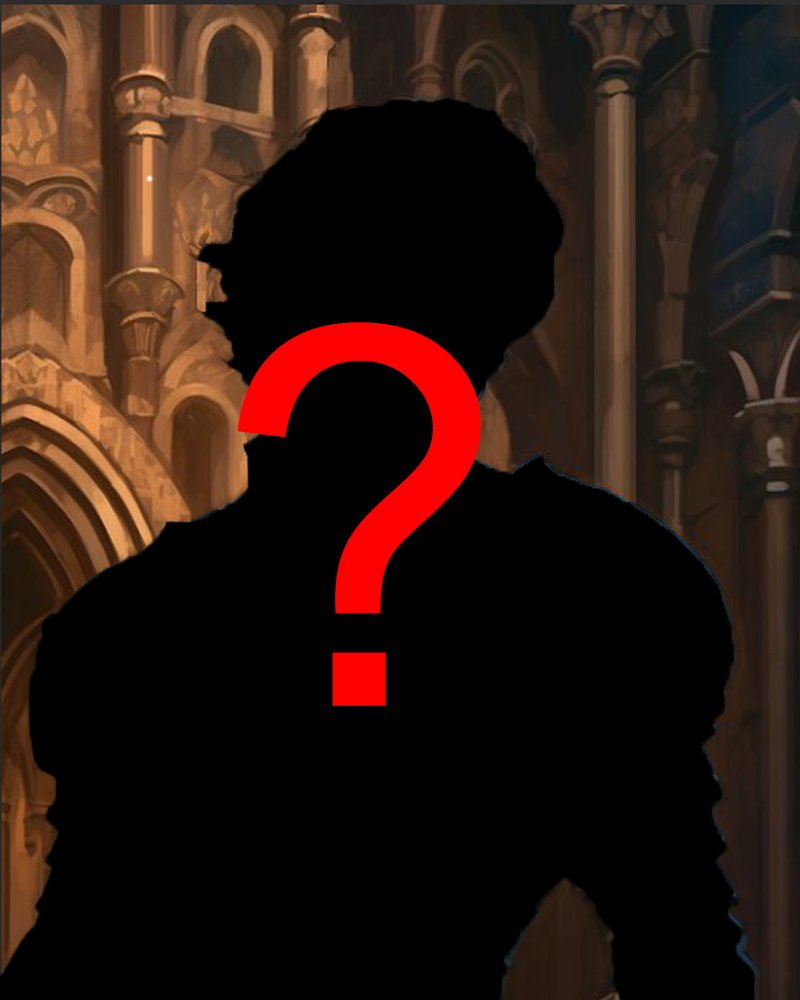
<style>
.page{position:relative;width:800px;height:1000px;background:#000000}
.page>*{position:absolute;margin:0}
.t1{font:526.2px "ArialMT";color:#ff0000;font-variant:small-caps}
</style>
<div class="page">
<p class="t1" style="left:237px;top:322px;width:244px;height:384px">?</p>
</div>
